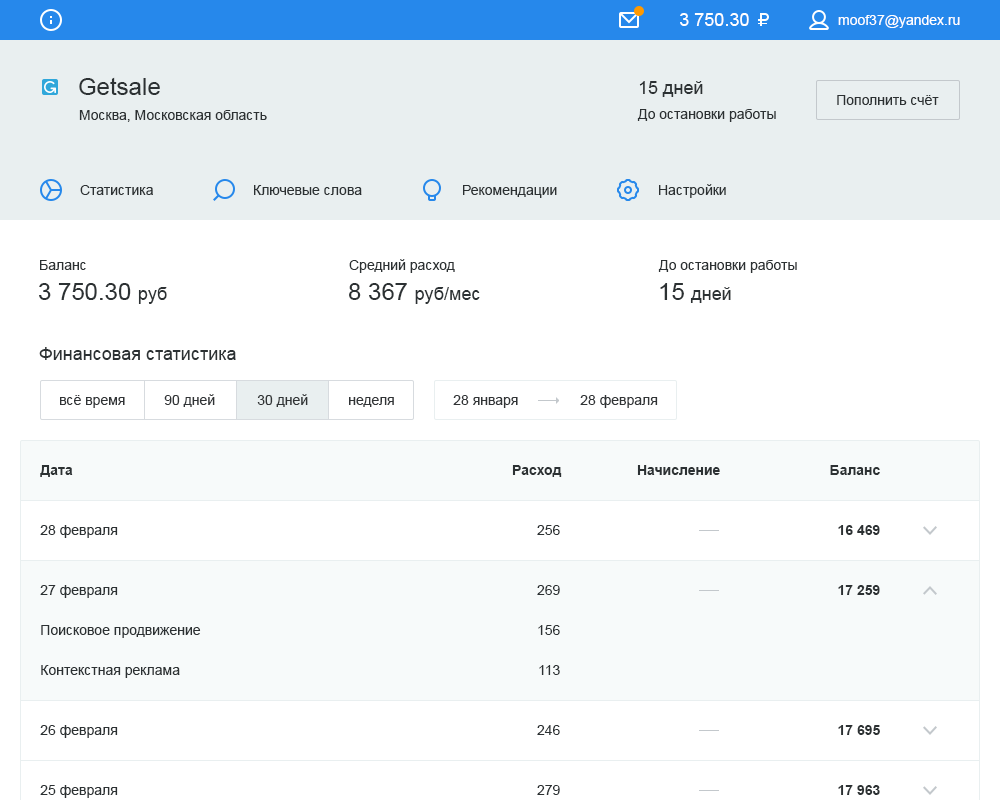
<style>
.page{position:relative;width:1000px;height:800px;background:#ffffff}
.page>*{position:absolute;margin:0}
.t1{font:18px "ArialMT";color:#ffffff}
.t2{font:14px "ArialMT";color:#ffffff}
.t3{font:24px "ArialMT";color:#2c3133}
.t4{font:18px "ArialMT";color:#2c3133}
.t5{font:14px "ArialMT";color:#2c3133}
.t6{font:14px "ArialMT";color:#313436}
.t7{font:14px "Arial-BoldMT";color:#2c3133}
.t8{font:14px/40px "ArialMT";color:#2c3133}
</style>
<div class="page">
<p class="t1" style="left:680px;top:13px;width:69px;height:13px">3 750.30</p>
<p class="t2" style="left:838px;top:15px;width:122px;height:13px">moof37@yandex.ru</p>
<p class="t3" style="left:79px;top:77px;width:81px;height:18px">Getsale</p>
<p class="t4" style="left:639px;top:81px;width:64px;height:16px">15 дней</p>
<p class="t5" style="left:837px;top:95px;width:102px;height:10px">Пополнить счёт</p>
<p class="t5" style="left:79px;top:110px;width:188px;height:12px">Москва, Московская область</p>
<p class="t5" style="left:637px;top:109px;width:139px;height:13px">До остановки работы</p>
<p class="t5" style="left:80px;top:185px;width:73px;height:10px">Статистика</p>
<p class="t5" style="left:254px;top:185px;width:108px;height:10px">Ключевые слова</p>
<p class="t5" style="left:463px;top:185px;width:94px;height:13px">Рекомендации</p>
<p class="t5" style="left:659px;top:184px;width:67px;height:14px">Настройки</p>
<p class="t5" style="left:40px;top:260px;width:46px;height:10px">Баланс</p>
<p class="t5" style="left:349px;top:259px;width:106px;height:14px">Средний расход</p>
<p class="t5" style="left:658px;top:260px;width:139px;height:13px">До остановки работы</p>
<p class="t3" style="left:39px;top:283px;width:128px;height:21px">3 750.30 <span class="t4">руб</span></p>
<p class="t4" style="left:349px;top:283px;width:131px;height:21px"><span class="t3">8 367 </span>руб/мес</p>
<p class="t4" style="left:660px;top:283px;width:71px;height:20px"><span class="t3">15 </span>дней</p>
<p class="t4" style="left:39px;top:347px;width:197px;height:13px">Финансовая статистика</p>
<p class="t6" style="left:60px;top:395px;width:65px;height:13px">всё время</p>
<p class="t6" style="left:164px;top:394px;width:51px;height:13px">90 дней</p>
<p class="t6" style="left:257px;top:394px;width:51px;height:13px">30 дней</p>
<p class="t6" style="left:349px;top:397px;width:45px;height:10px">неделя</p>
<p class="t6" style="left:453px;top:395px;width:65px;height:13px">28 января</p>
<p class="t6" style="left:580px;top:395px;width:78px;height:13px">28 февраля</p>
<p class="t7" style="left:40px;top:465px;width:33px;height:12px">Дата</p>
<p class="t7" style="left:512px;top:465px;width:50px;height:12px">Расход</p>
<p class="t7" style="left:637px;top:465px;width:83px;height:10px">Начисление</p>
<p class="t7" style="left:830px;top:465px;width:50px;height:10px">Баланс</p>
<p class="t5" style="left:40px;top:525px;width:78px;height:13px">28 февраля</p>
<p class="t5" style="left:537px;top:525px;width:23px;height:10px">256</p>
<p class="t7" style="left:838px;top:525px;width:42px;height:10px">16 469</p>
<p class="t5" style="left:40px;top:585px;width:78px;height:13px">27 февраля</p>
<p class="t5" style="left:537px;top:585px;width:23px;height:10px">269</p>
<p class="t7" style="left:838px;top:585px;width:42px;height:10px">17 259</p>
<p class="t8" style="left:41px;top:625px;width:160px;height:53px">Поисковое продвижение<br>Контекстная реклама</p>
<p class="t8" style="left:538px;top:625px;width:22px;height:50px;text-align:right">156<br>113</p>
<p class="t5" style="left:40px;top:725px;width:78px;height:13px">26 февраля</p>
<p class="t5" style="left:537px;top:725px;width:23px;height:10px">246</p>
<p class="t7" style="left:838px;top:725px;width:42px;height:10px">17 695</p>
<p class="t5" style="left:40px;top:785px;width:78px;height:13px">25 февраля</p>
<p class="t5" style="left:537px;top:785px;width:23px;height:10px">279</p>
<p class="t7" style="left:838px;top:785px;width:42px;height:10px">17 963</p>
</div>
